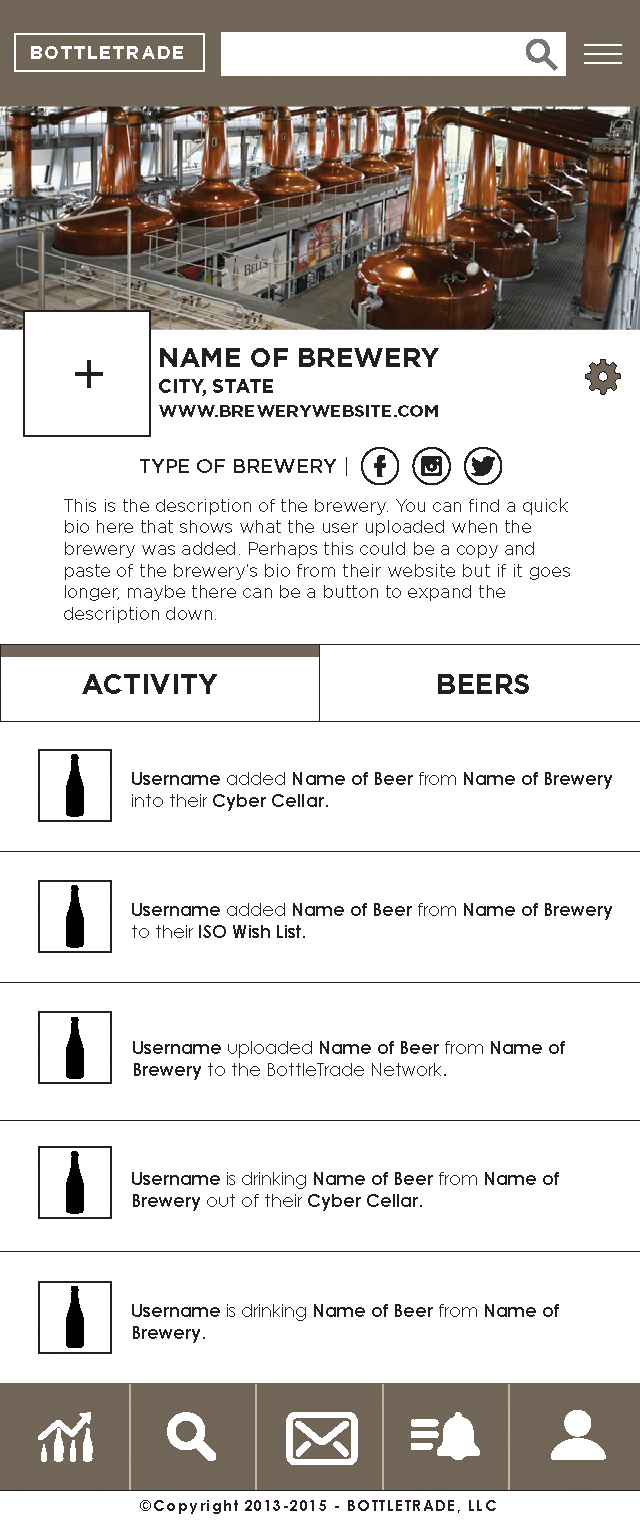
<style>
.page{position:relative;width:640px;height:1521px;background:#ffffff}
.page>*{position:absolute;margin:0}
.t1{font:18px "Gotham-Bold";letter-spacing:0.099em;color:#ffffff}
.t2{font:27px "Gotham-Bold";color:#231f20}
.t3{font:54px "CenturyGothic";color:#231f20}
.t4{font:19px "Gotham-Bold";color:#231f20}
.t5{font:17.1px "Gotham-Bold";color:#231f20}
.t6{font:20px "Gotham-Medium";color:#231f20}
.t7{font:18px "Gotham-Book";color:#231f20}
.t8{font:28px "Gotham-Bold";color:#231f20}
.t9{font:18px "CenturyGothic-Bold";color:#231f20}
.t10{font:18px "CenturyGothic";color:#231f20}
.t11{font:15px "CenturyGothic-Bold";letter-spacing:0.099em;color:#231f20}
</style>
<div class="page">
<p class="t1" style="left:31px;top:46px;width:152px;height:13px">BOTTLETRADE</p>
<p class="t2" style="left:160px;top:348px;width:279px;height:19px">NAME OF BREWERY</p>
<p class="t3" style="left:75px;top:360px;width:28px;height:28px">+</p>
<p class="t4" style="left:159px;top:379px;width:114px;height:17px">CITY, STATE</p>
<p class="t5" style="left:159px;top:405px;width:279px;height:12px">WWW.BREWERYWEBSITE.COM</p>
<p class="t6" style="left:140px;top:457px;width:207px;height:19px">TYPE OF BREWERY |</p>
<p class="t7" style="left:64px;top:498px;width:506px;height:125px">This is the description of the brewery. You can find a quick bio here that shows what the user uploaded when the brewery was added. Perhaps this could be a copy and paste of the brewery’s bio from their website but if it goes longer, maybe there can be a button to expand the description down.</p>
<p class="t8" style="left:82px;top:674px;width:135px;height:20px">ACTIVITY</p>
<p class="t8" style="left:438px;top:674px;width:91px;height:20px">BEERS</p>
<p class="t9" style="left:132px;top:772px;width:480px;height:39px">Username<span class="t10"> added </span>Name of Beer<span class="t10"> from </span>Name of Brewery<span class="t10"> <br>into their </span>Cyber Cellar<span class="t10">.</span></p>
<p class="t9" style="left:132px;top:903px;width:480px;height:35px">Username<span class="t10"> added </span>Name of Beer<span class="t10"> from </span>Name of Brewery<span class="t10"> <br>to their </span>ISO Wish List<span class="t10">.</span></p>
<p class="t10" style="left:133px;top:1041px;width:432px;height:39px"><span class="t9">Username</span> uploaded <span class="t9">Name of Beer</span> from <span class="t9">Name of <br>Brewery</span> to the BottleTrade Network.</p>
<p class="t9" style="left:132px;top:1172px;width:427px;height:39px">Username<span class="t10"> is drinking </span>Name of Beer<span class="t10"> from </span>Name of <br>Brewery<span class="t10"> out of their </span>Cyber Cellar<span class="t10">.</span></p>
<p class="t9" style="left:132px;top:1304px;width:427px;height:39px">Username<span class="t10"> is drinking </span>Name of Beer<span class="t10"> from </span>Name of <br>Brewery<span class="t10">.</span></p>
<p class="t11" style="left:140px;top:1500px;width:356px;height:14px">©Copyright 2013-2015 - BOTTLETRADE, LLC</p>
</div>
